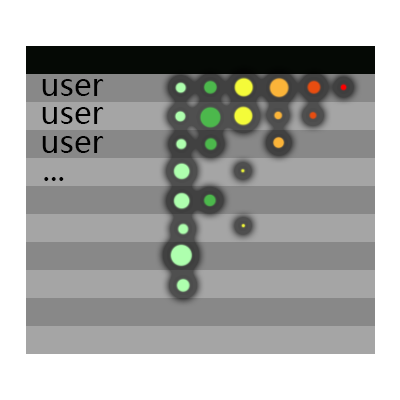
<style>
.page{position:relative;width:400px;height:400px;background:#ffffff}
.page>*{position:absolute;margin:0}
.t1{font:31px "MicrosoftYaHeiUI";color:#000000}
</style>
<div class="page">
<p class="t1" style="left:42px;top:79px;width:62px;height:17px">user</p>
<p class="t1" style="left:42px;top:107px;width:62px;height:17px">user</p>
<p class="t1" style="left:42px;top:136px;width:62px;height:17px">user</p>
<p class="t1" style="left:44px;top:177px;width:20px;height:4px">...</p>
</div>
